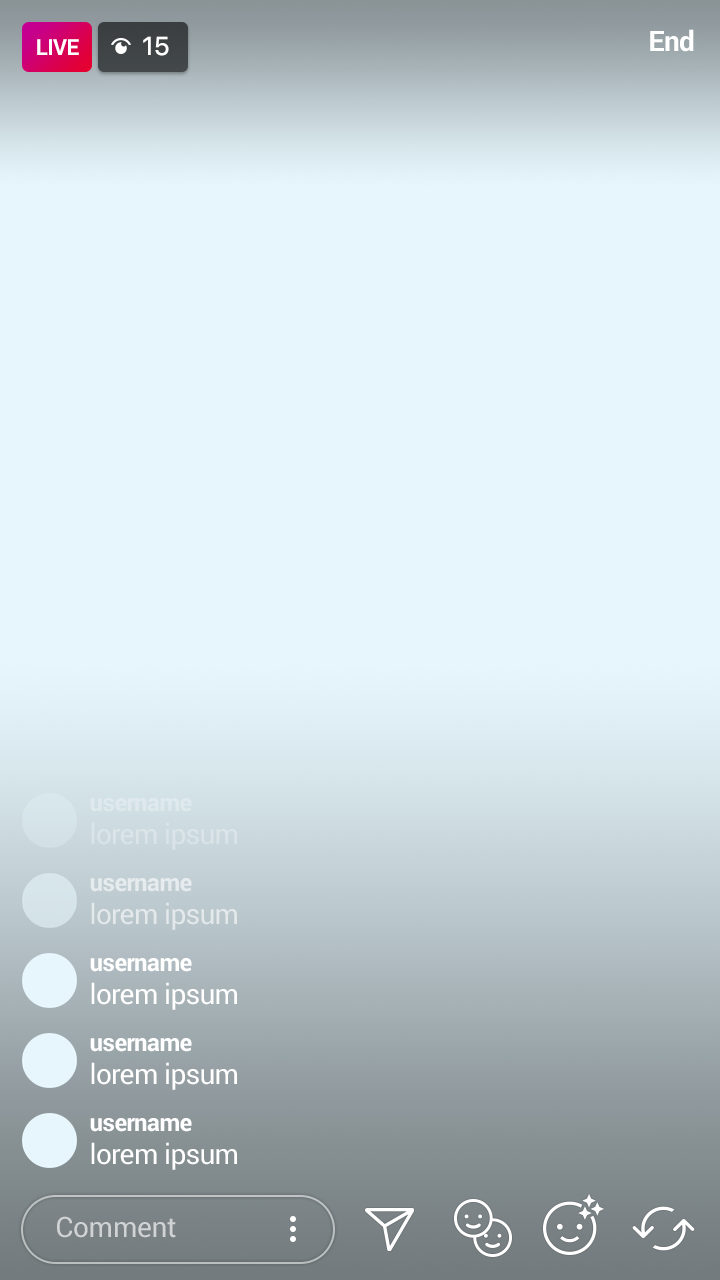
<style>
.page{position:relative;width:720px;height:1280px;background:#e6f6fc}
.page>*{position:absolute;margin:0}
.t1{font:28px "Roboto-Bold";letter-spacing:-0.025em;color:#ffffff}
.t2{font:22px "Roboto-Bold";letter-spacing:-0.025em;color:#ffffff}
.t3{font:26px "SFUIText-Medium";letter-spacing:-0.025em;color:#ffffff}
.t4{font:24px "Roboto-Bold";letter-spacing:-0.025em;color:#dfe9ed}
.t5{font:28px "Roboto-Regular";letter-spacing:-0.025em;color:#dbe4e8}
.t6{font:24px "Roboto-Bold";letter-spacing:-0.025em;color:#e6ebed}
.t7{font:28px "Roboto-Regular";letter-spacing:-0.025em;color:#e3e9eb}
.t8{font:24px "Roboto-Bold";letter-spacing:-0.025em;color:#ffffff}
.t9{font:28px "Roboto-Regular";letter-spacing:-0.025em;color:#ffffff}
.t10{font:28px "Roboto-Regular";letter-spacing:-0.01em;color:#d0d2d3}
</style>
<div class="page">
<p class="t1" style="left:650px;top:29px;width:44px;height:23px">End</p>
<p class="t2" style="left:37px;top:39px;width:42px;height:16px">LIVE</p>
<p class="t3" style="left:143px;top:36px;width:26px;height:20px">15</p>
<p class="t4" style="left:90px;top:798px;width:102px;height:14px">username</p>
<p class="t5" style="left:91px;top:822px;width:146px;height:28px">lorem ipsum</p>
<p class="t6" style="left:90px;top:878px;width:102px;height:14px">username</p>
<p class="t7" style="left:91px;top:902px;width:146px;height:28px">lorem ipsum</p>
<p class="t8" style="left:90px;top:958px;width:102px;height:14px">username</p>
<p class="t9" style="left:91px;top:982px;width:146px;height:28px">lorem ipsum</p>
<p class="t8" style="left:90px;top:1038px;width:102px;height:14px">username</p>
<p class="t9" style="left:91px;top:1062px;width:146px;height:28px">lorem ipsum</p>
<p class="t8" style="left:90px;top:1118px;width:102px;height:14px">username</p>
<p class="t9" style="left:91px;top:1142px;width:146px;height:28px">lorem ipsum</p>
<p class="t10" style="left:57px;top:1216px;width:119px;height:22px">Comment</p>
</div>
